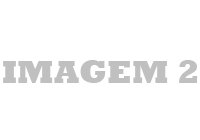
<style>
.page{position:relative;width:200px;height:140px;background:#ffffff}
.page>*{position:absolute;margin:0}
.t1{font:33.3px "Rockwell-ExtraBold";color:#c0c0c0}
</style>
<div class="page">
<p class="t1" style="left:3px;top:60px;width:195px;height:23px">IMAGEM 2</p>
</div>
